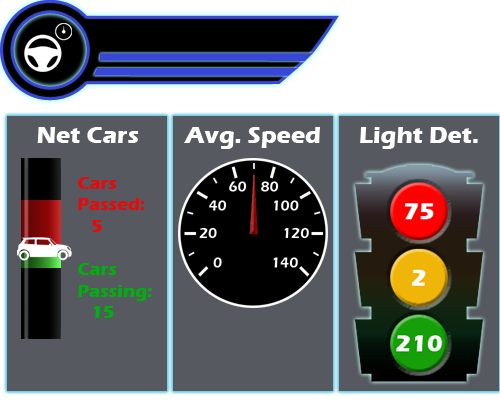
<style>
.page{position:relative;width:500px;height:400px;background:#56595f}
.page>*{position:absolute;margin:0}
.t1{font:24px "ErasITC-Bold";color:#ffffff}
.t2{font:18px "ErasITC-Bold";color:#00b10c}
.t3{font:18px "ErasITC-Bold";color:#e80a0a}
</style>
<div class="page">
<p class="t1" style="left:37px;top:127px;width:102px;height:16px">Net Cars</p>
<p class="t1" style="left:184px;top:127px;width:136px;height:22px">Avg. Speed</p>
<p class="t1" style="left:360px;top:127px;width:118px;height:22px">Light Det.</p>
<p class="t2" style="left:78px;top:177px;width:74px;height:141px"><span class="t3">Cars <br>Passed:<br>   5<br><br></span>Cars<br>Passing:<br>   15</p>
</div>
